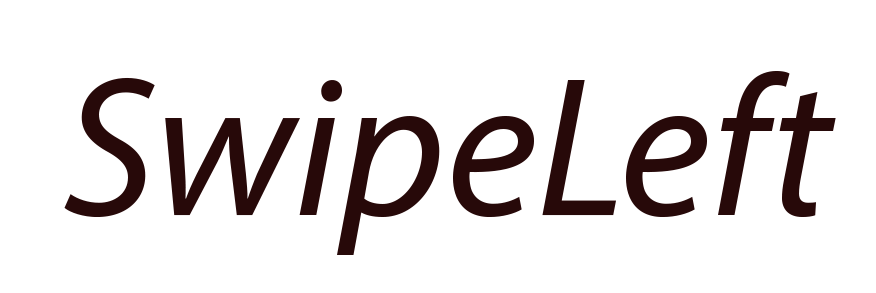
<style>
.page{position:relative;width:876px;height:293px;background:#ffffff}
.page>*{position:absolute;margin:0}
.t1{font:200px "MyriadPro-It";color:#270909}
</style>
<div class="page">
<p class="t1" style="left:64px;top:71px;width:772px;height:184px">SwipeLeft</p>
</div>
